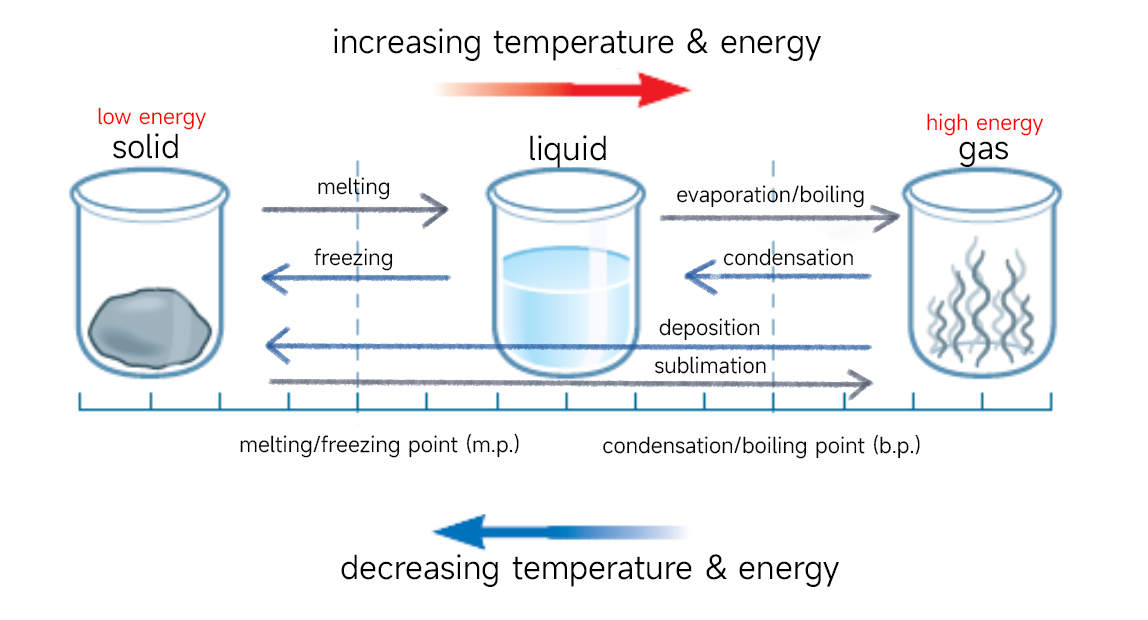
<style>
.page{position:relative;width:1148px;height:620px;background:#ffffff}
.page>*{position:absolute;margin:0}
.t1{font:32px "MiSans-Normal";color:#000000}
.t2{font:21.3px "MiSans-Normal";color:#ff0101}
.t3{font:21.3px "MiSans-Normal";color:#ff0000}
.t4{font:21.3px "MiSans-Normal";color:#000000}
</style>
<div class="page">
<p class="t1" style="left:334px;top:28px;width:487px;height:33px">increasing temperature &amp; energy</p>
<p class="t2" style="left:98px;top:107px;width:108px;height:23px">low energy</p>
<p class="t3" style="left:927px;top:113px;width:117px;height:23px">high energy</p>
<p class="t1" style="left:113px;top:133px;width:65px;height:26px">solid</p>
<p class="t1" style="left:530px;top:135px;width:76px;height:33px">liquid</p>
<p class="t1" style="left:959px;top:141px;width:49px;height:26px">gas</p>
<p class="t4" style="left:318px;top:177px;width:72px;height:23px">melting</p>
<p class="t4" style="left:677px;top:185px;width:187px;height:23px">evaporation/boiling</p>
<p class="t4" style="left:314px;top:248px;width:79px;height:23px">freezing</p>
<p class="t4" style="left:723px;top:248px;width:130px;height:18px">condensation</p>
<p class="t4" style="left:659px;top:318px;width:101px;height:23px">deposition</p>
<p class="t4" style="left:655px;top:356px;width:111px;height:18px">sublimation</p>
<p class="t4" style="left:240px;top:433px;width:279px;height:25px">melting/freezing point (m.p.)</p>
<p class="t4" style="left:603px;top:434px;width:317px;height:25px">condensation/boiling point (b.p.)</p>
<p class="t1" style="left:341px;top:554px;width:498px;height:33px">decreasing temperature &amp; energy</p>
</div>
